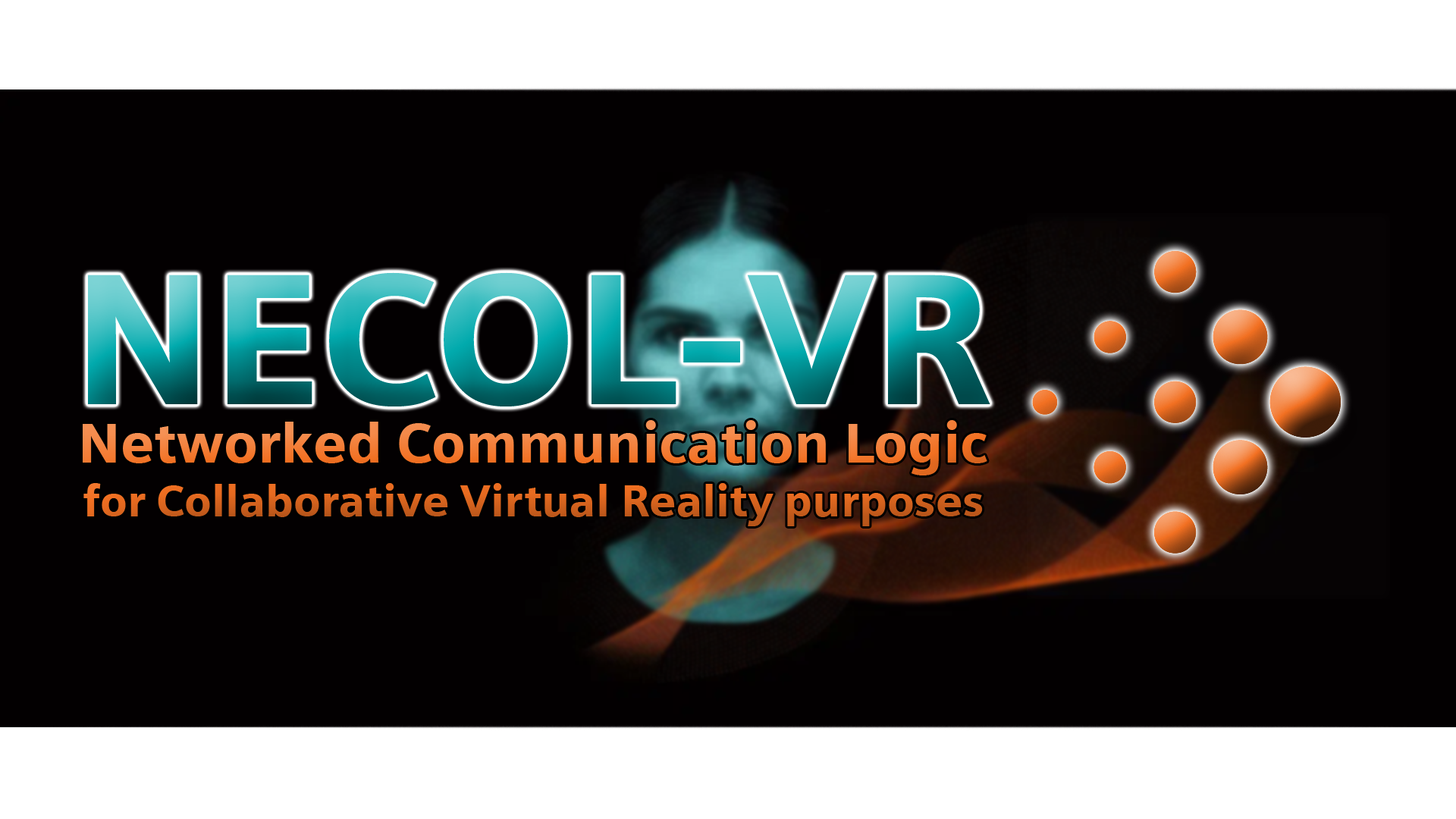
<style>
.page{position:relative;width:1456px;height:819px;background:#030001}
.page>*{position:absolute;margin:0}
.t1{font:185.7px "SiemensSans-Black"}
.t2{font:44.6px "SiemensSans-Black"}
.t3{font:56.1px "SiemensSans-Black"}
</style>
<div class="page">
<p class="t1" style="left:88px;top:272px;width:902px;height:134px">NECOL-VR</p>
<p class="t2" style="left:83px;top:420px;width:904px;height:106px;text-align:center"><span class="t3">Networked Communication Logic<br></span>for Collaborative Virtual Reality purposes</p>
</div>
